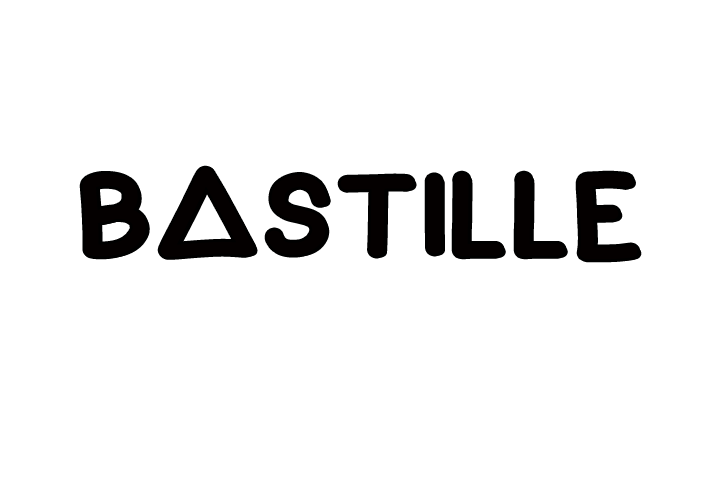
<style>
.page{position:relative;width:720px;height:480px;background:#ffffff}
.page>*{position:absolute;margin:0}
.t1{font:112.5px "BASTILLE";letter-spacing:0.06em;color:#040000;font-weight:bold;scale:1.14 1}
</style>
<div class="page">
<p class="t1" style="left:82px;top:168px;width:556px;height:92px">BASTille</p>
</div>
